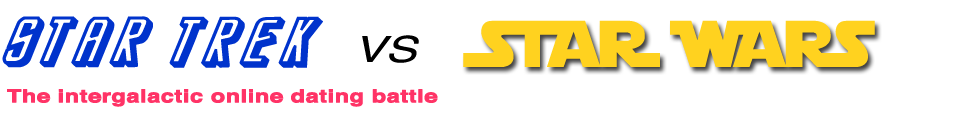
<style>
.page{position:relative;width:960px;height:120px;background:#ffffff}
.page>*{position:absolute;margin:0}
.t1{font:70px "StarTrekEnterpriseFuture-Italic";color:#0033cc;font-weight:bold;font-style:italic;scale:1.3 1}
.t2{font:65px "StarJediLogoMonoLine";letter-spacing:0.005em;color:#ffd21f}
.t3{font:36px "Helvetica-Oblique";color:#000000;scale:1.3 1}
.t4{font:18px "Helvetica-Bold";color:#ff3366;font-weight:bold;scale:1.3 1}
</style>
<div class="page">
<p class="t1" style="left:2px;top:16px;width:151px;height:52px">STAR</p>
<p class="t1" style="left:169px;top:16px;width:154px;height:52px">TREK</p>
<p class="t2" style="left:463px;top:20px;width:412px;height:47px">STAR WARS</p>
<p class="t3" style="left:362px;top:35px;width:57px;height:28px">VS</p>
<p class="t4" style="left:7px;top:89px;width:431px;height:18px">The intergalactic online dating battle</p>
</div>
